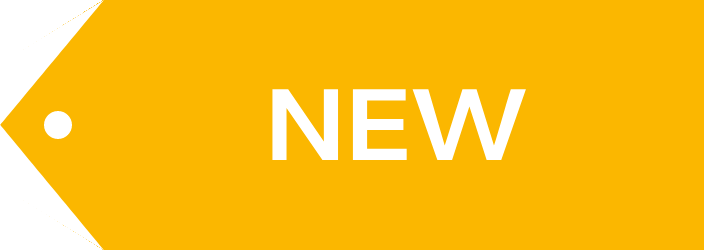
<style>
.page{position:relative;width:704px;height:250px;background:#fbb700}
.page>*{position:absolute;margin:0}
.t1{font:102px "Lunchtype-ExpandedMedium";color:#ffffff}
</style>
<div class="page">
<p class="t1" style="left:272px;top:89px;width:254px;height:71px">NEW</p>
</div>
